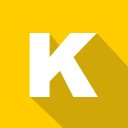
<style>
.page{position:relative;width:128px;height:128px;background:#ffcc00}
.page>*{position:absolute;margin:0}
.t1{font:90.2px "Arial-Black";color:#ffffff}
</style>
<div class="page">
<p class="t1" style="left:29px;top:33px;width:69px;height:64px">K</p>
</div>
